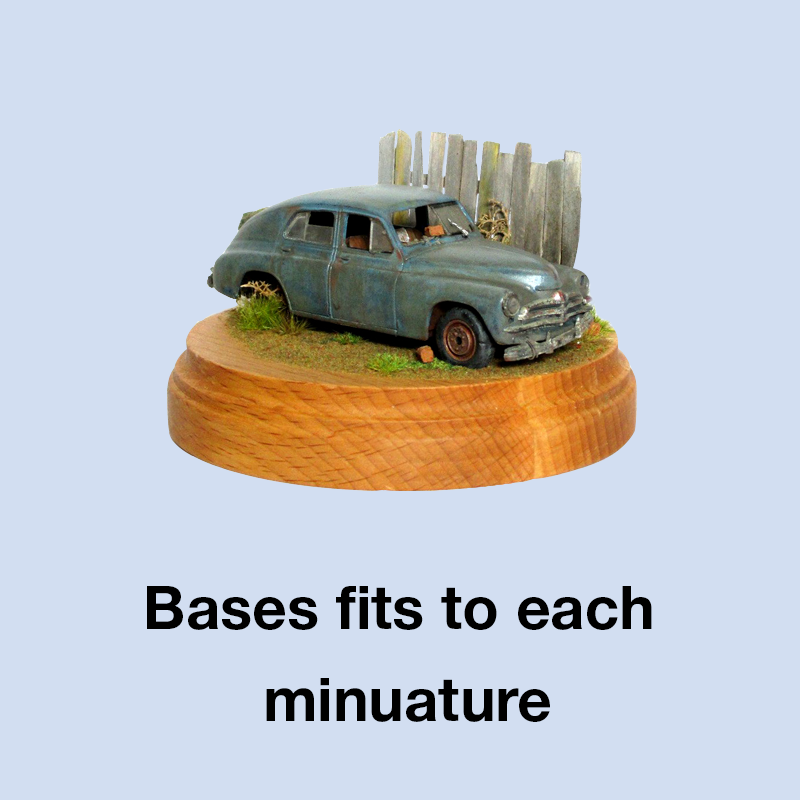
<style>
.page{position:relative;width:800px;height:800px;background:#d2def1}
.page>*{position:absolute;margin:0}
.t1{font:60px "HelveticaNeueCyr-Bold";color:#000000}
</style>
<div class="page">
<p class="t1" style="left:147px;top:586px;width:505px;height:136px;text-align:center">Bases fits to each <br>minuature</p>
</div>
